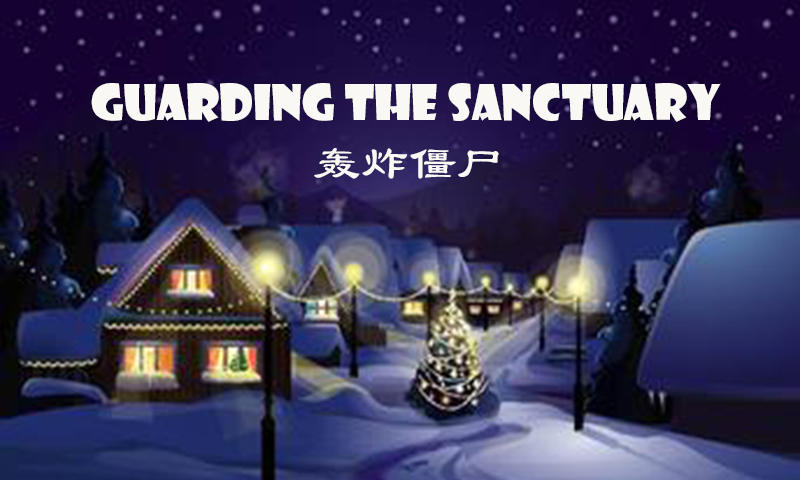
<style>
.page{position:relative;width:800px;height:480px}
.page>*{position:absolute;margin:0}
.t1{font:48px "ShowcardGothic";color:#f9f8f5}
.t2{font:48px "LiSu";color:#f9f8f5}
</style>
<div class="page">
<p class="t1" style="left:91px;top:83px;width:630px;height:39px">Guarding The Sanctuary</p>
<p class="t2" style="left:314px;top:148px;width:185px;height:31px">轰炸僵尸</p>
</div>
